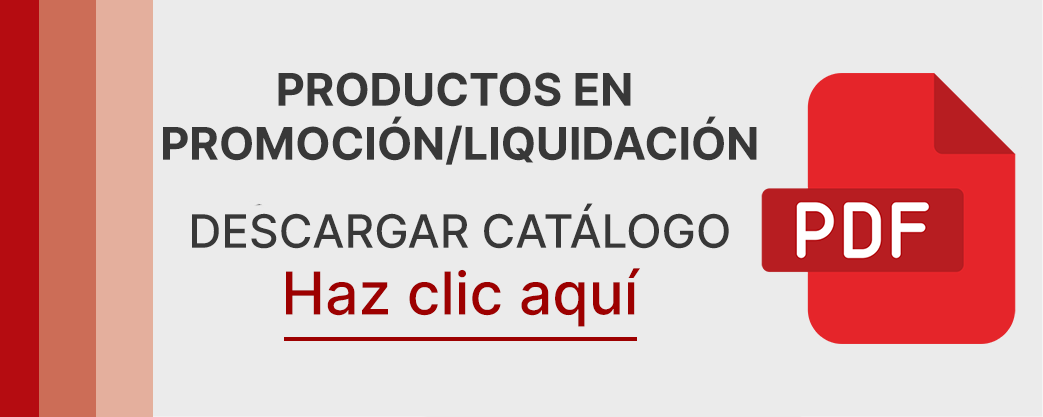
<style>
.page{position:relative;width:1043px;height:417px;background:#ebebeb}
.page>*{position:absolute;margin:0}
.t1{font:45px "Inter-Bold";color:#383838}
.t2{font:45px/44px "Inter-Bold";color:#383838}
.t3{font:46px/44px "Inter-Medium";color:#383838}
.t4{font:59px "Inter-Medium";color:#9d0000}
</style>
<div class="page">
<p class="t1" style="left:163px;top:72px;width:594px;height:177px;text-align:center">PRODUCTOS EN <br>PROMOCIÓN/<span class="t2">LIQUIDACIÓN<br></span><span class="t3"><br>DESCARGAR CATÁLOGO</span></p>
<p class="t4" style="left:286px;top:268px;width:354px;height:59px">Haz clic aquí</p>
</div>
